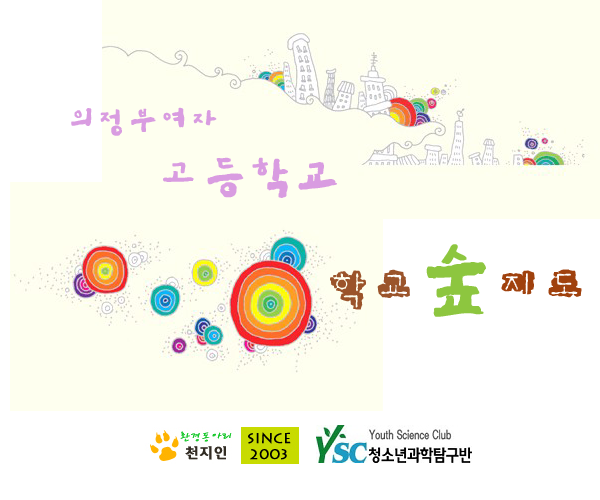
<style>
.page{position:relative;width:600px;height:500px;background:#feffef}
.page>*{position:absolute;margin:0}
.t1{font:30px/20px "FBGeDongE-Medium";color:#d99ce1;font-weight:bold}
.t2{font:45px/20px "FBGeDongE-Medium";color:#d99ce1;font-weight:bold}
.t3{font:45px "FBDoKaeB-Medium";color:#9b542b;font-weight:bold}
.t4{font:75px "FBGeDongE-Medium";color:#8dc63f;font-weight:bold}
.t5{font:45px "FBDoKaeB-Medium";color:#a0410d;font-weight:bold}
</style>
<div class="page">
<p class="t1" style="left:71px;top:107px;width:266px;height:91px;text-align:center">의정부여자<br>          <br><br>                <span class="t2">고등학교</span></p>
<p class="t3" style="left:330px;top:244px;width:252px;height:73px">학교<span class="t4">숲</span><span class="t5">지도</span></p>
</div>
